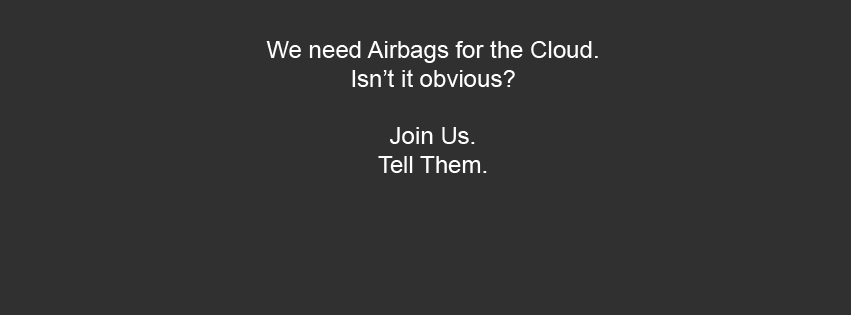
<style>
.page{position:relative;width:851px;height:315px;background:#303030}
.page>*{position:absolute;margin:0}
.t1{font:24px "ArialMT";color:#ffffff}
</style>
<div class="page">
<p class="t1" style="left:266px;top:40px;width:332px;height:133px;text-align:center">We need Airbags for the Cloud.<br>Isn’t it obvious?<br><br>Join Us.<br>Tell Them.</p>
</div>
